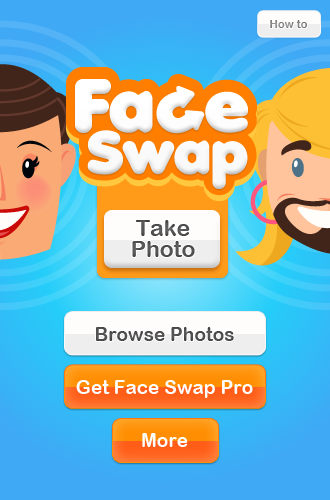
<style>
.page{position:relative;width:330px;height:500px}
.page>*{position:absolute;margin:0}
.t1{font:11.2px "ArialRoundedMTBold";color:#858585}
.t2{font:22.7px/21.5px "ArialRoundedMTBold";color:#525252}
.t3{font:19.1px "ArialRoundedMTBold";color:#4e4e4e}
.t4{font:19.1px "ArialRoundedMTBold";color:#ffffff}
</style>
<div class="page">
<p class="t1" style="left:270px;top:20px;width:37px;height:8px">How to</p>
<p class="t2" style="left:132px;top:220px;width:63px;height:37px;text-align:center">Take<br>Photo</p>
<p class="t3" style="left:96px;top:327px;width:138px;height:14px">Browse Photos</p>
<p class="t4" style="left:76px;top:380px;width:177px;height:18px">Get Face Swap Pro</p>
<p class="t4" style="left:142px;top:433px;width:46px;height:14px">More</p>
</div>
